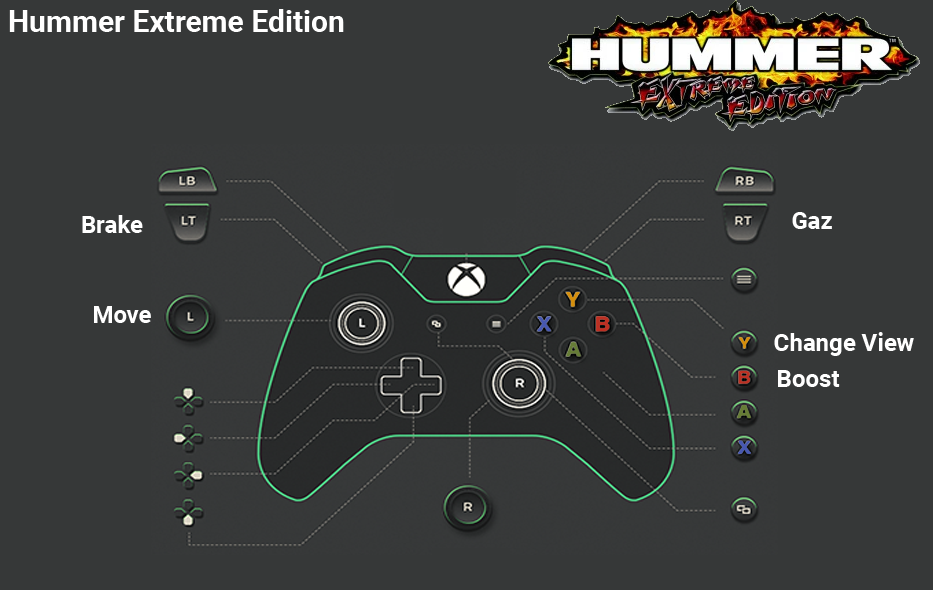
<style>
.page{position:relative;width:933px;height:590px;background:#363838}
.page>*{position:absolute;margin:0}
.t1{font:30px "Roboto-Bold";color:#ffffff}
.t2{font:24px "Roboto-Bold";color:#ffffff}
</style>
<div class="page">
<p class="t1" style="left:9px;top:9px;width:335px;height:23px">Hummer Extreme Edition</p>
<p class="t2" style="left:82px;top:215px;width:61px;height:18px">Brake</p>
<p class="t2" style="left:792px;top:212px;width:40px;height:17px">Gaz</p>
<p class="t2" style="left:94px;top:306px;width:57px;height:17px">Move</p>
<p class="t2" style="left:774px;top:332px;width:140px;height:24px">Change View</p>
<p class="t2" style="left:778px;top:370px;width:62px;height:17px">Boost</p>
</div>
